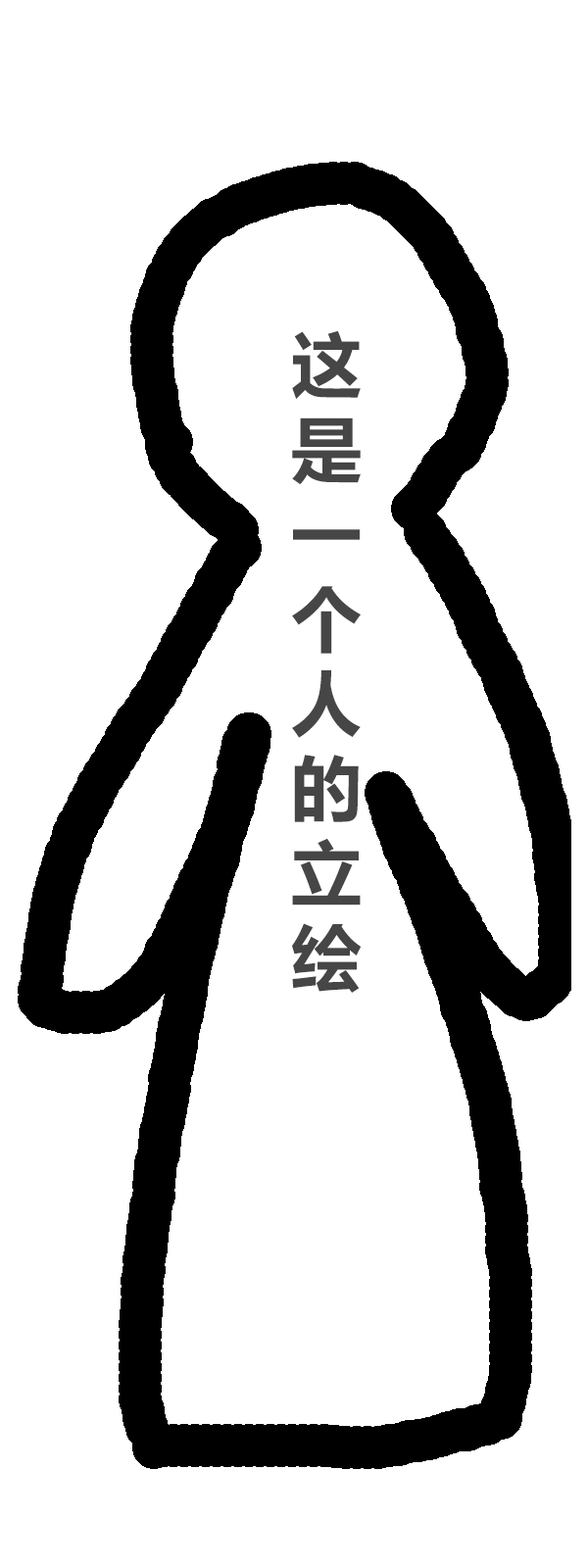
<style>
.page{position:relative;width:588px;height:1568px;background:#ffffff}
.page>*{position:absolute;margin:0}
.t1{font:70.6px "MicrosoftYaHei-Bold";color:#464646}
</style>
<div class="page">
<p class="t1" style="left:292px;top:330px;width:70px;height:663px">这<br>是<br>一<br>个<br>人<br>的<br>立<br>绘</p>
</div>
